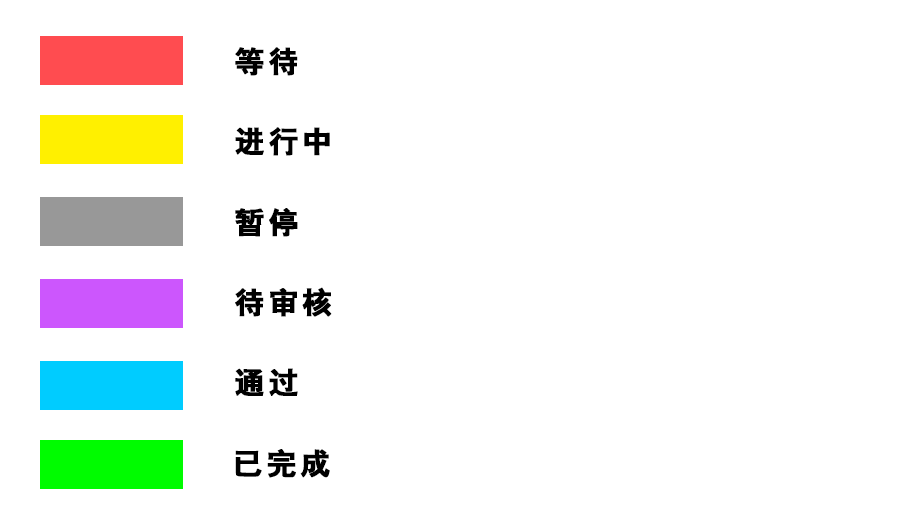
<style>
.page{position:relative;width:922px;height:524px;background:#ffffff}
.page>*{position:absolute;margin:0}
.t1{font:30px "HYb2gj";letter-spacing:0.1em;color:#000000;font-weight:bold}
</style>
<div class="page">
<p class="t1" style="left:235px;top:47px;width:63px;height:29px">等待</p>
<p class="t1" style="left:235px;top:127px;width:95px;height:29px">进行中</p>
<p class="t1" style="left:235px;top:208px;width:63px;height:29px">暂停</p>
<p class="t1" style="left:235px;top:287px;width:97px;height:30px">待审核</p>
<p class="t1" style="left:235px;top:368px;width:63px;height:28px">通过</p>
<p class="t1" style="left:235px;top:449px;width:95px;height:29px">已完成</p>
</div>
